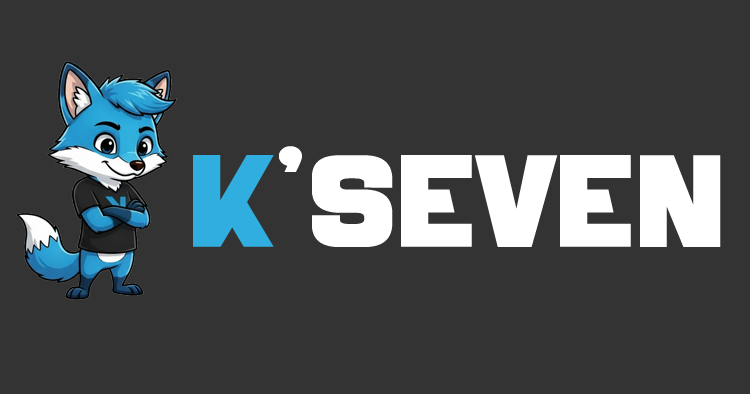
<style>
.page{position:relative;width:750px;height:394px;background:#333333}
.page>*{position:absolute;margin:0}
.t1{font:125.5px "BabellBold";color:#ffffff;scale:1.17 1}
.t2{font:125.5px "BabellBold";color:#30aedf;scale:1.17 1}
</style>
<div class="page">
<p class="t1" style="left:193px;top:146px;width:528px;height:101px"><span class="t2">K</span>’Seven</p>
</div>
